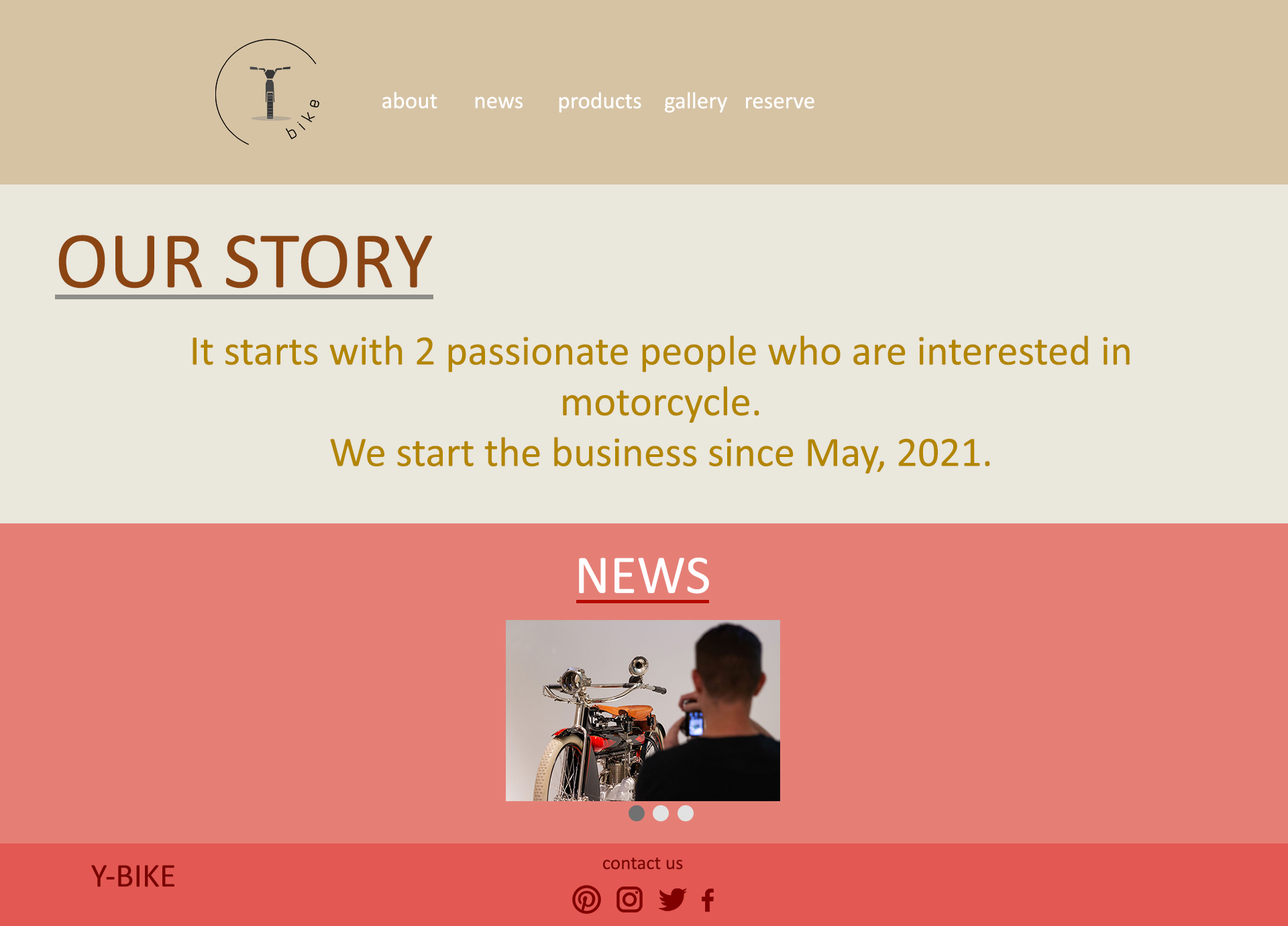
<style>
.page{position:relative;width:1288px;height:926px;background:#eae7dc}
.page>*{position:absolute;margin:0}
.t1{font:23.5px "Calibri";color:#ffffff}
.t2{font:81.2px "Calibri";color:#8b4513}
.t3{font:42.3px "Calibri";color:#b38600}
.t4{font:55px "Calibri";color:#fffefe}
.t5{font:19.5px "Calibri";color:#790401}
.t6{font:33.5px "Calibri";color:#790401}
</style>
<div class="page">
<p class="t1" style="left:382px;top:92px;width:55px;height:17px">about</p>
<p class="t1" style="left:475px;top:97px;width:48px;height:12px">news</p>
<p class="t1" style="left:559px;top:92px;width:82px;height:21px">products</p>
<p class="t1" style="left:665px;top:92px;width:62px;height:21px">gallery</p>
<p class="t1" style="left:746px;top:97px;width:68px;height:12px">reserve</p>
<p class="t2" style="left:58px;top:235px;width:375px;height:53px">OUR STORY</p>
<p class="t3" style="left:193px;top:335px;width:937px;height:139px;text-align:center">It starts with 2 passionate people who are interested in motorcycle.<br>We start the business since May, 2021.</p>
<p class="t4" style="left:579px;top:557px;width:130px;height:37px">NEWS</p>
<p class="t5" style="left:603px;top:857px;width:80px;height:12px">contact us</p>
<p class="t6" style="left:91px;top:865px;width:83px;height:22px">Y-BIKE</p>
</div>
